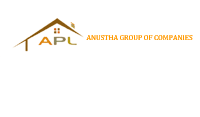
<style>
.page{position:relative;width:200px;height:117px;background:#ffffff}
.page>*{position:absolute;margin:0}
.t1{font:7.3px "CambriaMath";color:#ff9900;text-transform:uppercase}
</style>
<div class="page">
<p class="t1" style="left:86px;top:35px;width:107px;height:5px">anustha group of companies</p>
</div>
